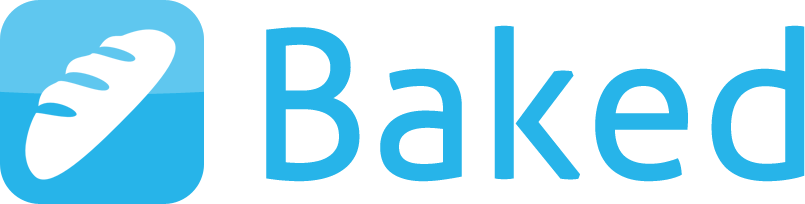
<style>
.page{position:relative;width:805px;height:204px;background:#ffffff}
.page>*{position:absolute;margin:0}
.t1{font:200px "Aller-Light";color:#27b4e9;font-weight:bold}
</style>
<div class="page">
<p class="t1" style="left:266px;top:25px;width:539px;height:157px">Baked</p>
</div>
